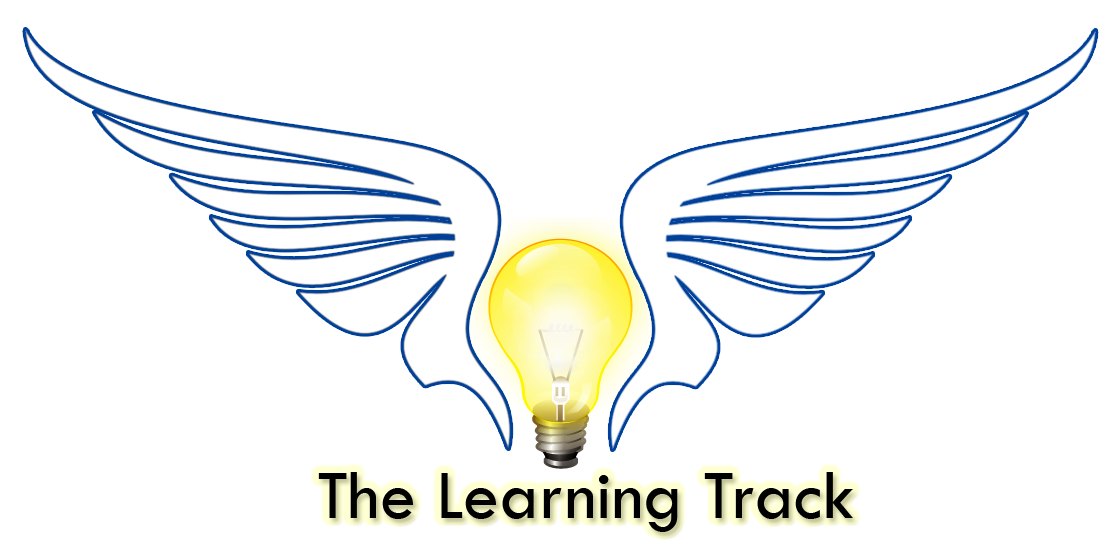
<style>
.page{position:relative;width:1115px;height:556px;background:#ffffff}
.page>*{position:absolute;margin:0}
.t1{font:72px "TwCenMT-Regular";color:#000000}
</style>
<div class="page">
<p class="t1" style="left:318px;top:472px;width:535px;height:60px">The Learning Track</p>
</div>
